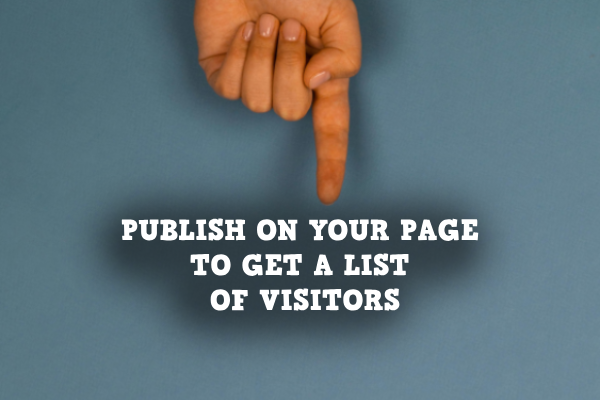
<style>
.page{position:relative;width:600px;height:400px}
.page>*{position:absolute;margin:0}
.t1{font:29px "HVDComicSerifPro";color:#ffffff}
</style>
<div class="page">
<p class="t1" style="left:121px;top:218px;width:358px;height:93px;text-align:center">PUBLISH ON YOUR PAGE <br>TO GET A LIST <br>OF VISITORS</p>
</div>
